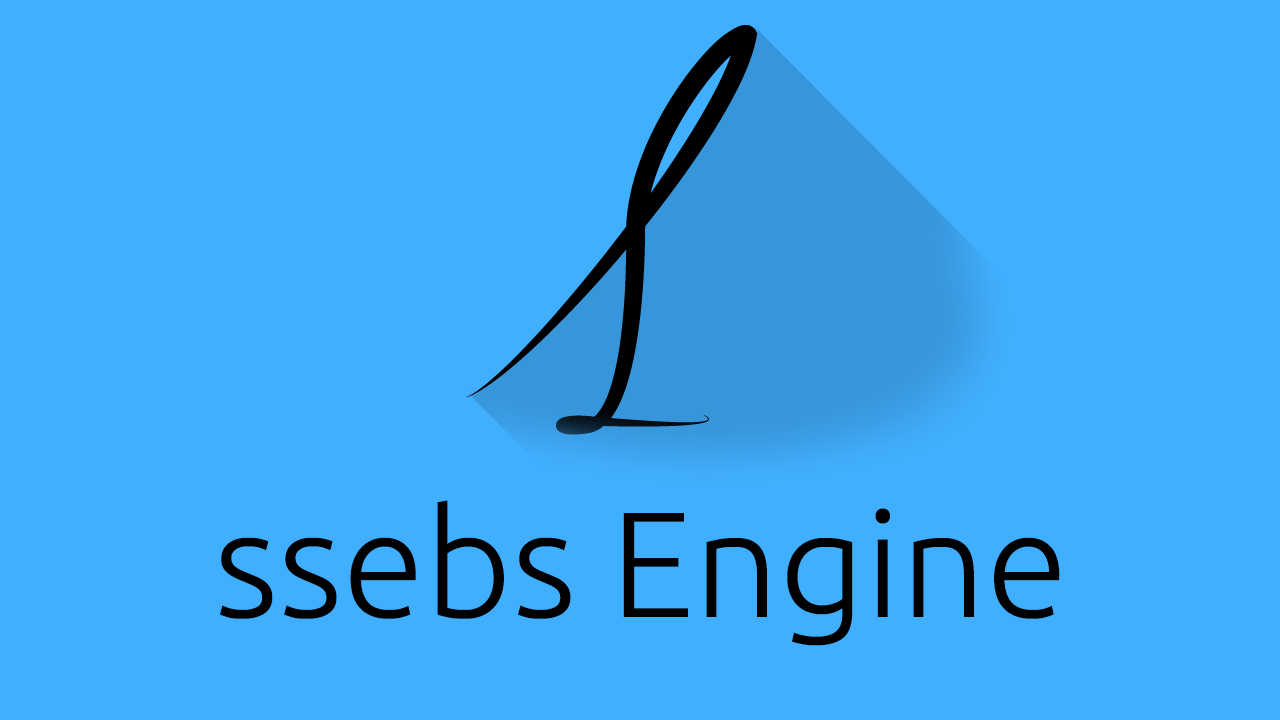
<style>
.page{position:relative;width:1280px;height:720px;background:#41afff}
.page>*{position:absolute;margin:0}
.t1{font:150px "Ubuntu-Light";color:#000000}
</style>
<div class="page">
<p class="t1" style="left:220px;top:500px;width:840px;height:146px">ssebs Engine</p>
</div>
